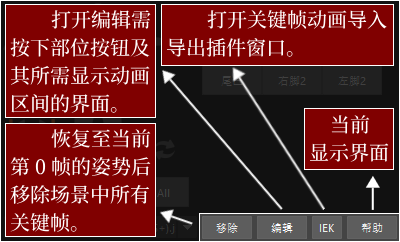
<style>
.page{position:relative;width:400px;height:242px;background:#800000}
.page>*{position:absolute;margin:0}
.t1{font:20px/28px "SourceHanSerifSC-Medium";color:#ffffff}
</style>
<div class="page">
<p class="t1" style="left:10px;top:10px;width:141px;height:103px">打开编辑需<br>按下部位按钮及<br>其所需显示动画<br>区间的界面。</p>
<p class="t1" style="left:166px;top:10px;width:221px;height:47px">打开关键帧动画导入<br>导出插件窗口。</p>
<p class="t1" style="left:310px;top:115px;width:79px;height:47px">当前<br>显示界面</p>
<p class="t1" style="left:10px;top:129px;width:141px;height:103px">恢复至当前<br>第 0 帧的姿势后<br>移除场景中所有<br>关键帧。</p>
</div>
